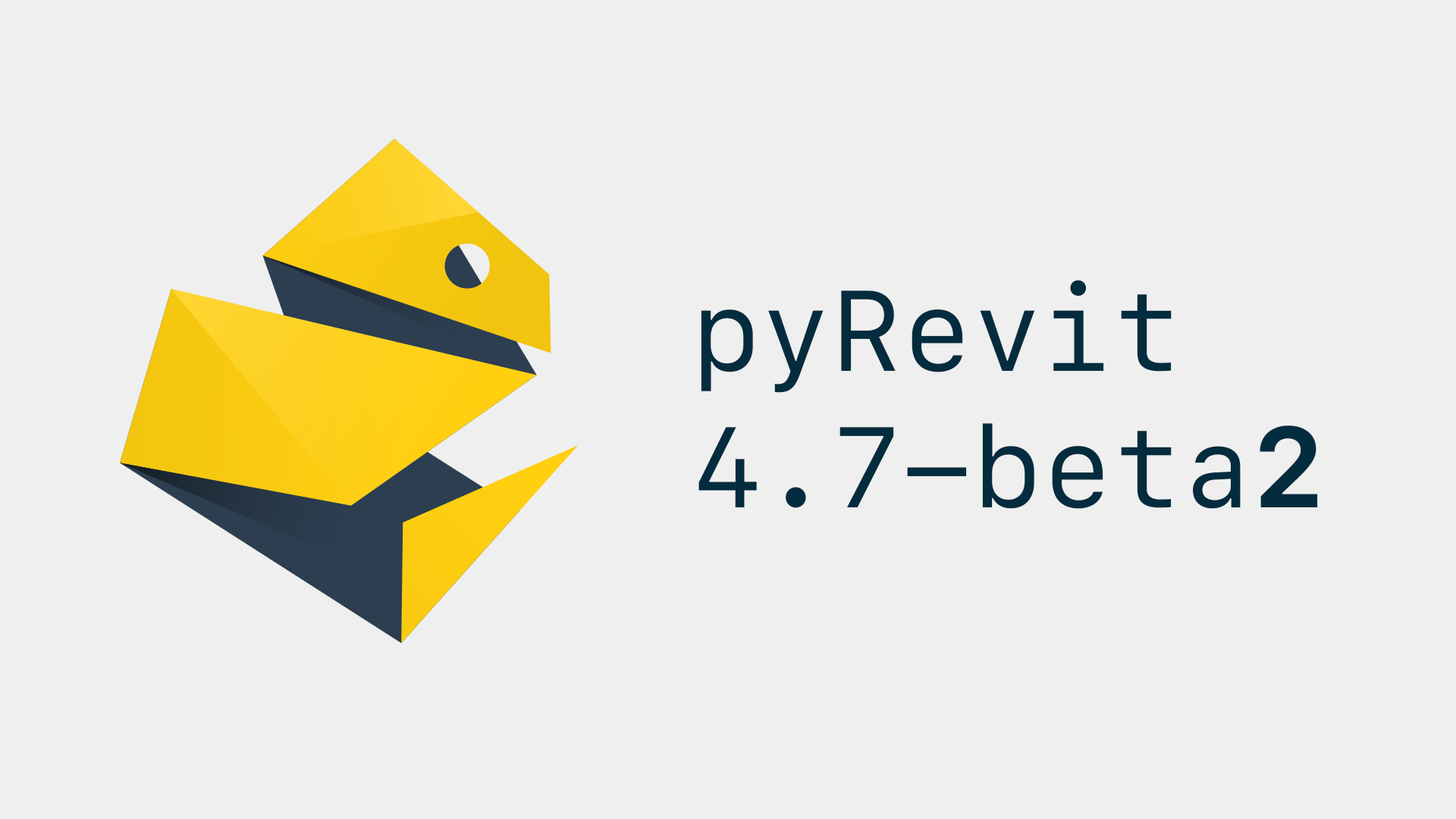
<style>
.page{position:relative;width:1456px;height:819px;background:#efefef}
.page>*{position:absolute;margin:0}
.t1{font:113.7px "SFMono-Regular";color:#032c3e}
.t2{font:113.7px "SFMono-Bold";color:#032c3e}
</style>
<div class="page">
<p class="t1" style="left:698px;top:280px;width:620px;height:229px">pyRevit<br>4.7-beta<span class="t2">2</span></p>
</div>
